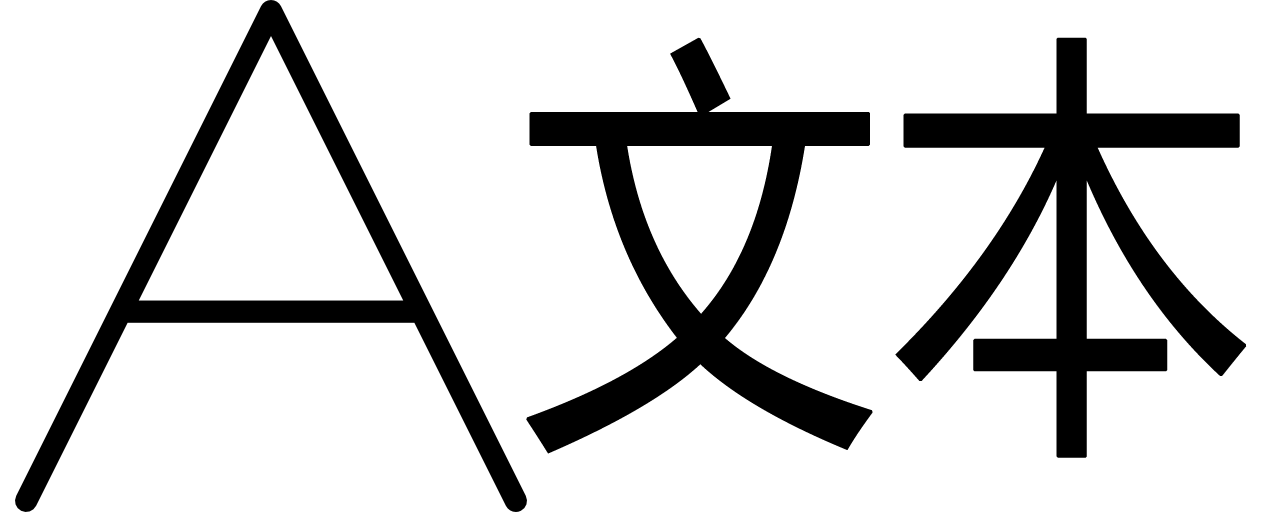
<style>
.page{position:relative;width:1280px;height:512px;background:#ffffff}
.page>*{position:absolute;margin:0}
.t1{font:432px "MicrosoftYaHei";letter-spacing:0.005em;color:#000000;font-weight:bold;scale:0.83 1}
</style>
<div class="page">
<p class="t1" style="left:526px;top:37px;width:721px;height:421px">文本</p>
</div>
